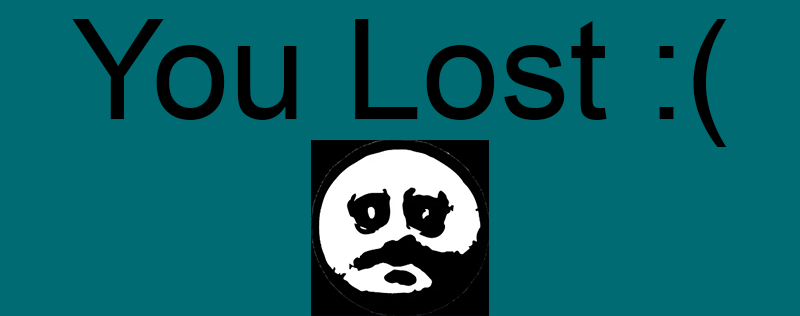
<style>
.page{position:relative;width:800px;height:316px;background:#006b72}
.page>*{position:absolute;margin:0}
.t1{font:139px "ArialMT";color:#000000}
</style>
<div class="page">
<p class="t1" style="left:72px;top:19px;width:655px;height:128px">You Lost :(</p>
</div>
